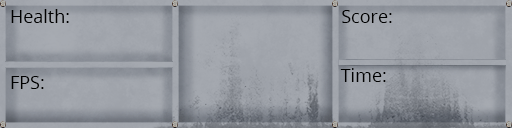
<style>
.page{position:relative;width:512px;height:128px}
.page>*{position:absolute;margin:0}
.t1{font:18px "OpenSans";color:#000000}
</style>
<div class="page">
<p class="t1" style="left:11px;top:9px;width:58px;height:14px">Health:</p>
<p class="t1" style="left:342px;top:10px;width:50px;height:13px">Score:</p>
<p class="t1" style="left:11px;top:76px;width:33px;height:13px">FPS:</p>
<p class="t1" style="left:340px;top:68px;width:46px;height:14px">Time:</p>
</div>
